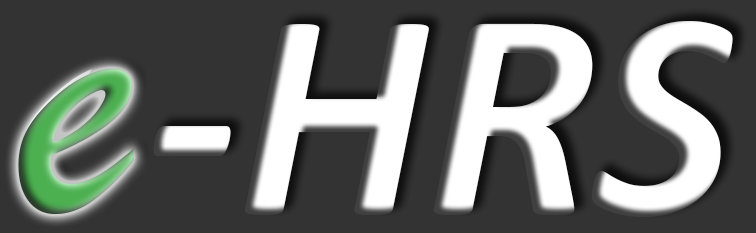
<style>
.page{position:relative;width:756px;height:233px;background:#333333}
.page>*{position:absolute;margin:0}
.t1{font:300px "Calibri-BoldItalic";color:#ffffff}
</style>
<div class="page">
<p class="t1" style="left:153px;top:20px;width:580px;height:197px">-HRS</p>
</div>
